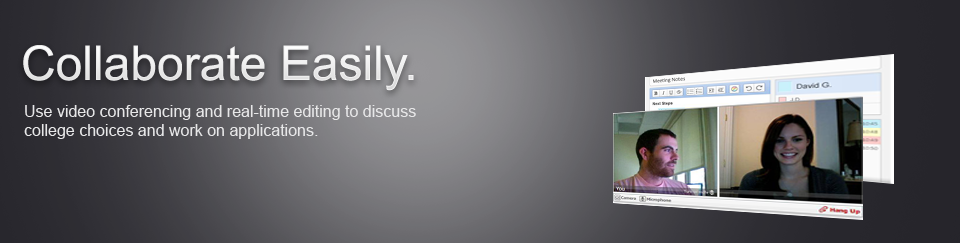
<style>
.page{position:relative;width:960px;height:243px}
.page>*{position:absolute;margin:0}
.t1{font:48px "ArialMT";color:#ffffff}
.t2{font:16px "ArialMT";color:#e7e7e8}
</style>
<div class="page">
<p class="t1" style="left:23px;top:45px;width:391px;height:46px">Collaborate Easily.</p>
<p class="t2" style="left:24px;top:105px;width:392px;height:34px">Use video conferencing and real-time editing to discuss <br>college choices and work on applications.</p>
</div>
